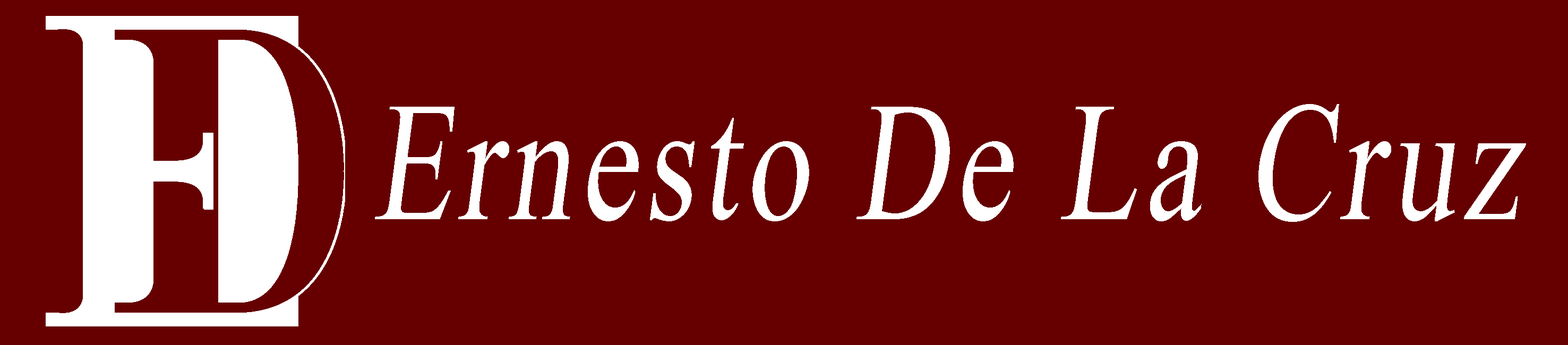
<style>
.page{position:relative;width:1568px;height:345px;background:#660000}
.page>*{position:absolute;margin:0}
.t1{font:169.9px "TimesNewRomanPSMT";letter-spacing:0.06em;color:#ffffff;font-style:italic;scale:0.75 1}
</style>
<div class="page">
<p class="t1" style="left:375px;top:104px;width:1151px;height:118px">Ernesto De La Cruz</p>
</div>
